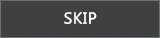
<style>
.page{position:relative;width:160px;height:38px;background:#404040}
.page>*{position:absolute;margin:0}
.t1{font:16px "MicrosoftPhagsPa";letter-spacing:0.04em;color:#ffffff;text-transform:uppercase}
</style>
<div class="page">
<p class="t1" style="left:64px;top:12px;width:33px;height:12px">SKIP</p>
</div>
